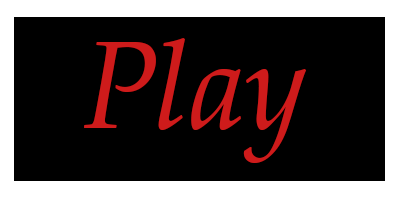
<style>
.page{position:relative;width:400px;height:200px;background:#000000}
.page>*{position:absolute;margin:0}
.t1{font:125px "PalatinoLinotype-Italic";color:#ce1b1b}
</style>
<div class="page">
<p class="t1" style="left:84px;top:38px;width:223px;height:125px">Play</p>
</div>
